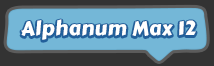
<style>
.page{position:relative;width:214px;height:66px;background:#74b7d7}
.page>*{position:absolute;margin:0}
.t1{font:20px "CarterOne";letter-spacing:0.025em;color:#ffffff}
</style>
<div class="page">
<p class="t1" style="left:21px;top:19px;width:175px;height:21px">Alphanum Max 12</p>
</div>
